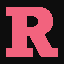
<style>
.page{position:relative;width:64px;height:64px;background:#0d0d0d}
.page>*{position:absolute;margin:0}
.t1{font:72px "Rockwell-Bold";color:#f2637e;font-weight:bold}
</style>
<div class="page">
<p class="t1" style="left:6px;top:7px;width:52px;height:50px">R</p>
</div>
